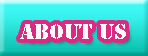
<style>
.page{position:relative;width:148px;height:56px}
.page>*{position:absolute;margin:0}
.t1{font:20px "StencilStd";color:#fcf6f6}
</style>
<div class="page">
<p class="t1" style="left:20px;top:24px;width:106px;height:15px">ABOUT US</p>
</div>
